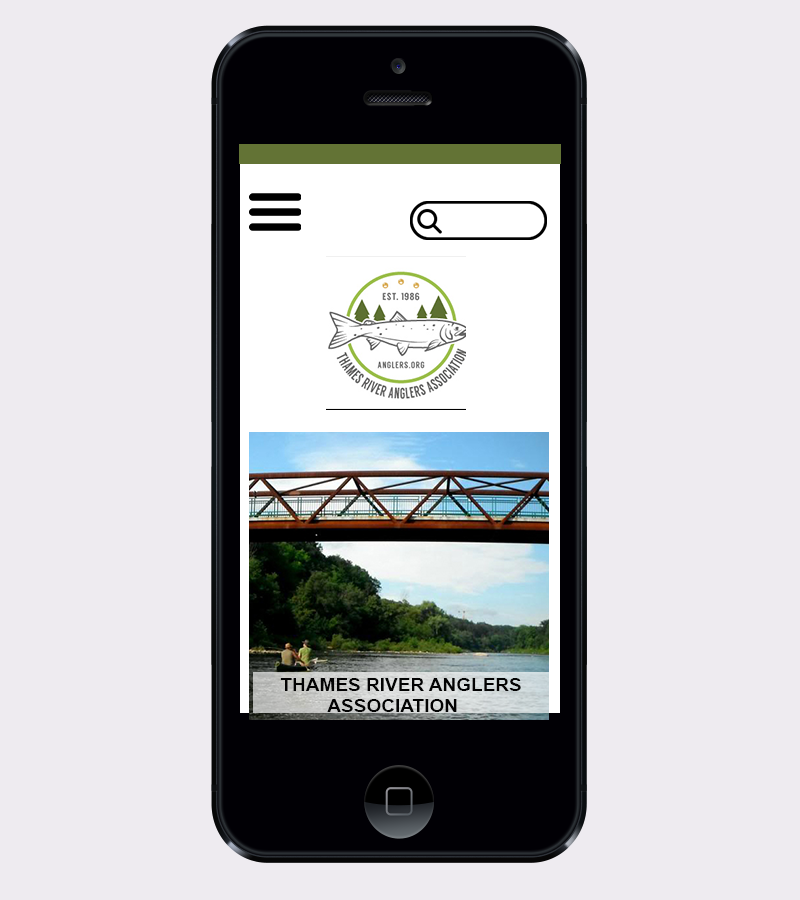
<style>
.page{position:relative;width:800px;height:900px;background:#eeebf0}
.page>*{position:absolute;margin:0}
.t1{font:18px "Arial-BoldMT";color:#030303;scale:1.06 1}
.t2{font:18px "Arial-BoldMT";color:#637335;scale:1.06 1}
</style>
<div class="page">
<p class="t1" style="left:280px;top:678px;width:241px;height:34px"><span class="t2">     </span>THAMES RIVER ANGLERS <br>              ASSOCIATION</p>
</div>
